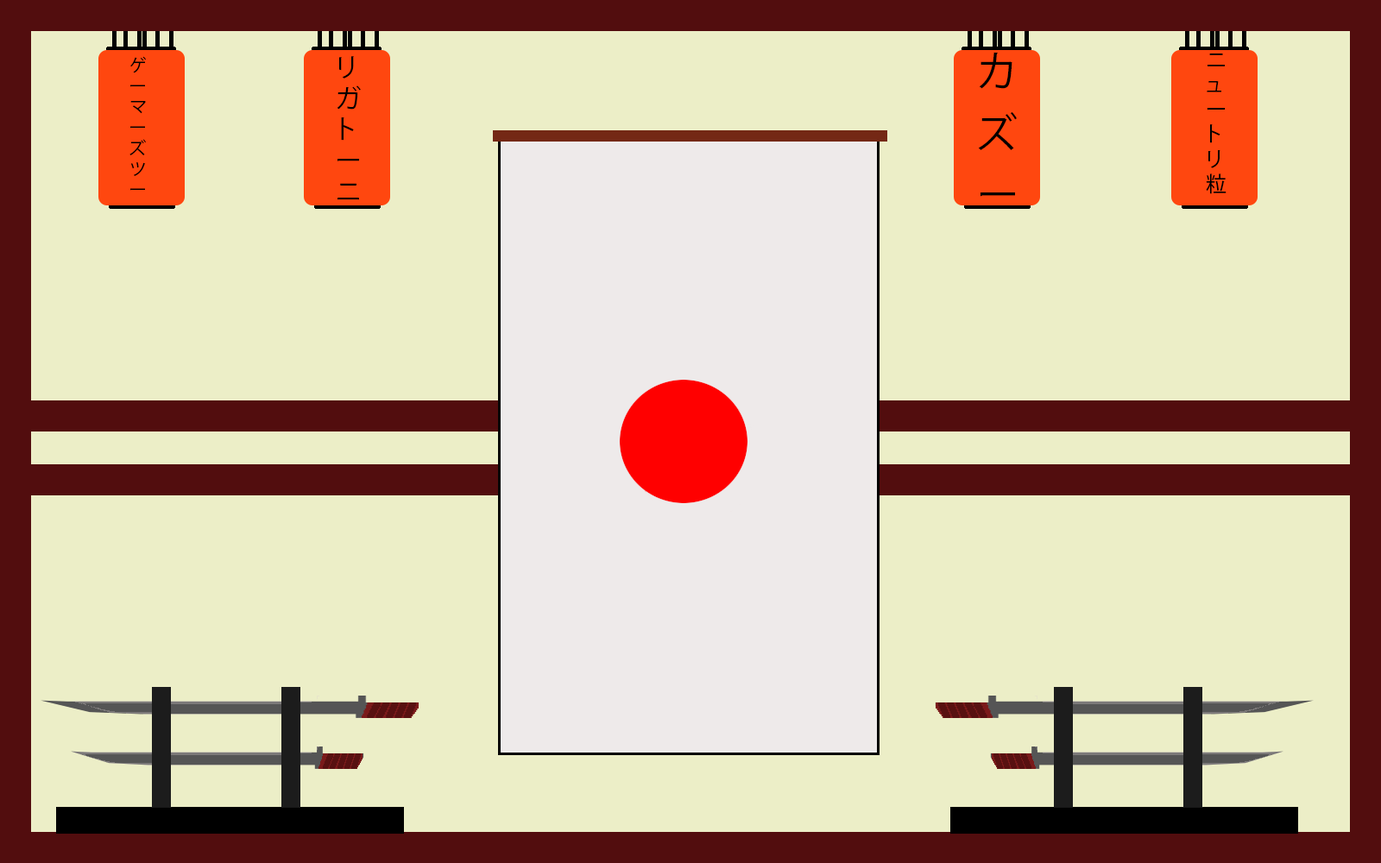
<style>
.page{position:relative;width:1381px;height:863px;background:#eceec7}
.page>*{position:absolute;margin:0}
.t1{font:41.4px/62.2px "KozGoPr6N-Regular";color:#000000}
.t2{font:20.7px "KozGoPr6N-Regular";color:#000000}
.t3{font:17.3px "KozGoPr6N-Regular";color:#000000}
.t4{font:25.9px "KozGoPr6N-Regular";color:#000000}
</style>
<div class="page">
<p class="t1" style="left:978px;top:52px;width:39px;height:145px">カ<br>ズ<br>ー</p>
<p class="t2" style="left:1206px;top:54px;width:21px;height:140px">ニ<br>ュ<br>ー<br>ト<br>リ<br>粒</p>
<p class="t3" style="left:129px;top:56px;width:17px;height:135px">ゲ<br>ー<br>マ<br>ー<br>ズ<br>ツ<br>ー</p>
<p class="t4" style="left:337px;top:56px;width:24px;height:144px">リ<br>ガ<br>ト<br>ー<br>ニ</p>
</div>
